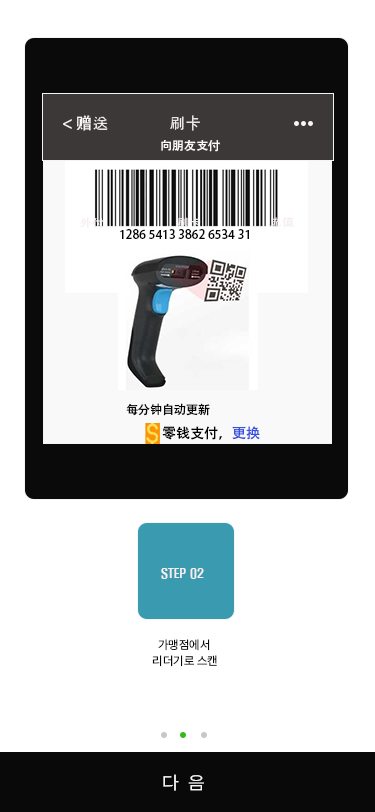
<style>
.page{position:relative;width:375px;height:812px;background:#ffffff}
.page>*{position:absolute;margin:0}
.t1{font:16px "AdobeHeitiStd-Regular";color:#fbf8f8}
.t2{font:16px "Gulim";color:#fbf8f8}
.t3{font:16px "Gulim";color:#faf5f5}
.t4{font:12px "AdobeHeitiStd-Regular";color:#fbf8f8}
.t5{font:12px "AdobeHeitiStd-Regular";color:#070707}
.t6{font:14px "AdobeHeitiStd-Regular";color:#000000}
.t7{font:14px "AdobeHeitiStd-Regular";color:#3551de}
.t8{font:12px "H2hdrM";color:#f6f0f0}
.t9{font:12px/16px "Pretendard-Regular";color:#0b0a0a}
.t10{font:11px/14.7px "H2hdrM";color:#0b0a0a}
.t11{font:18px "Pretendard-Regular";color:#f2f6f2;scale:1.07 1}
</style>
<div class="page">
<p class="t1" style="left:63px;top:115px;width:45px;height:16px">&lt; 赠<span class="t2">送</span></p>
<p class="t3" style="left:170px;top:115px;width:30px;height:16px">刷卡</p>
<p class="t4" style="left:161px;top:140px;width:59px;height:12px">向朋友支付</p>
<p class="t5" style="left:120px;top:229px;width:129px;height:10px">1286 5413 3862 6534 31</p>
<p class="t5" style="left:114px;top:403px;width:96px;height:13px"><span class="t4">每</span>每分钟自动更新</p>
<p class="t6" style="left:162px;top:426px;width:98px;height:14px">零钱支付，<span class="t7">更换</span></p>
<p class="t8" style="left:161px;top:568px;width:43px;height:11px">STEP 02</p>
<p class="t9" style="left:152px;top:639px;width:65px;height:28px"><span class="t10">    </span>가맹점에서 <br>   리더기로 스캔</p>
<p class="t11" style="left:163px;top:774px;width:41px;height:17px">다  음</p>
</div>
